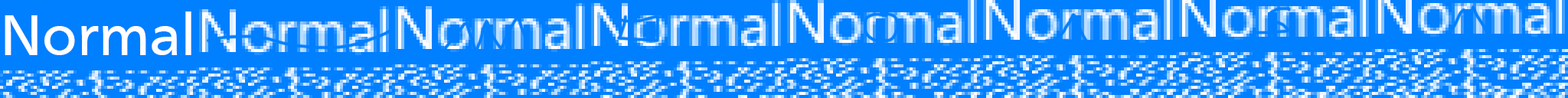
<style>
.page{position:relative;width:1568px;height:98px;background:#007fff}
.page>*{position:absolute;margin:0}
.t1{font:60.1px "Frutiger";color:#ffffff}
</style>
<div class="page">
<p class="t1" style="left:5px;top:11px;width:186px;height:44px">Normal</p>
</div>
